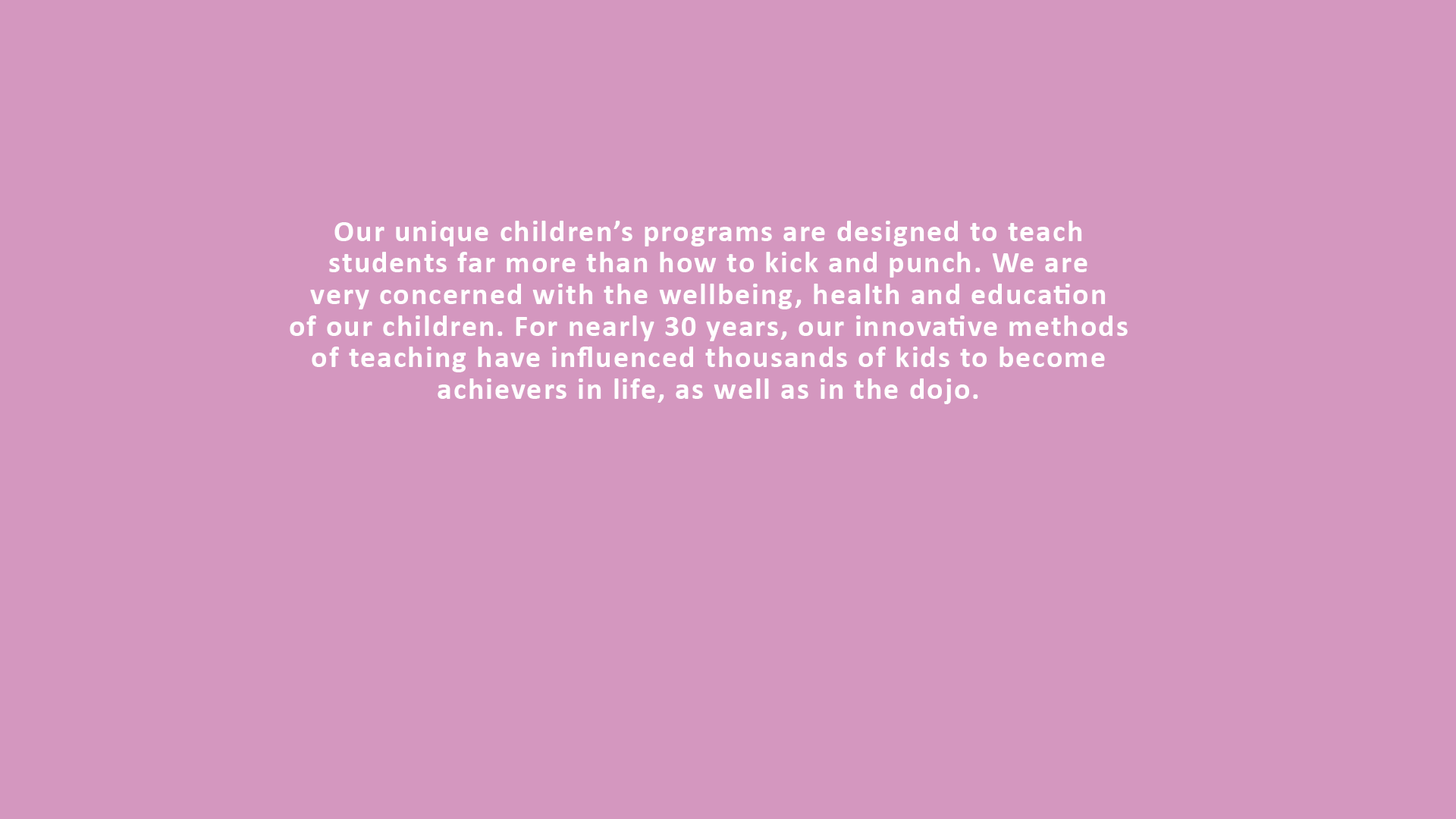
<style>
.page{position:relative;width:1456px;height:819px;background:#d497bf}
.page>*{position:absolute;margin:0}
.t1{font:30.3px/31.6px "Calibri-Bold";letter-spacing:0.05em;color:#ffffff}
</style>
<div class="page">
<p class="t1" style="left:290px;top:221px;width:838px;height:183px;text-align:center">Our unique children’s programs are designed to teach<br>students far more than how to kick and punch. We are<br>very concerned with the wellbeing, health and education<br>of our children. For nearly 30 years, our innovative methods<br>of teaching have influenced thousands of kids to become<br>achievers in life, as well as in the dojo.</p>
</div>
